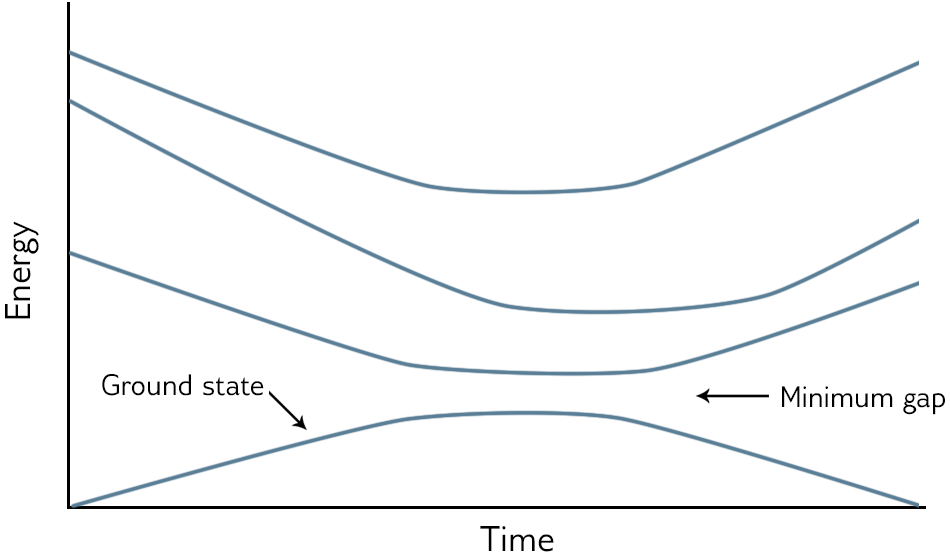
<style>
.page{position:relative;width:950px;height:560px;background:#ffffff}
.page>*{position:absolute;margin:0}
.t1{font:36px "GilliusADFNo2-Regular";color:#000000}
.t2{font:30px "GilliusADFNo2-Regular";color:#000000}
</style>
<div class="page">
<p class="t1" style="left:5px;top:221px;width:34px;height:98px;rotate:-90deg">Energy</p>
<p class="t2" style="left:102px;top:374px;width:162px;height:22px">Ground state</p>
<p class="t2" style="left:782px;top:386px;width:163px;height:29px">Minimum gap</p>
<p class="t1" style="left:480px;top:526px;width:74px;height:26px">Time</p>
</div>
